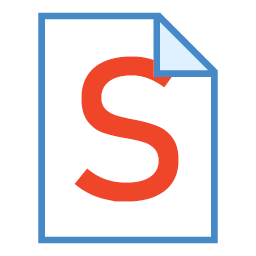
<style>
.page{position:relative;width:256px;height:256px;background:#ffffff}
.page>*{position:absolute;margin:0}
.t1{font:200px "Bahnschrift";letter-spacing:0.023em;color:#ef462a}
</style>
<div class="page">
<p class="t1" style="left:74px;top:56px;width:105px;height:146px">S</p>
</div>
